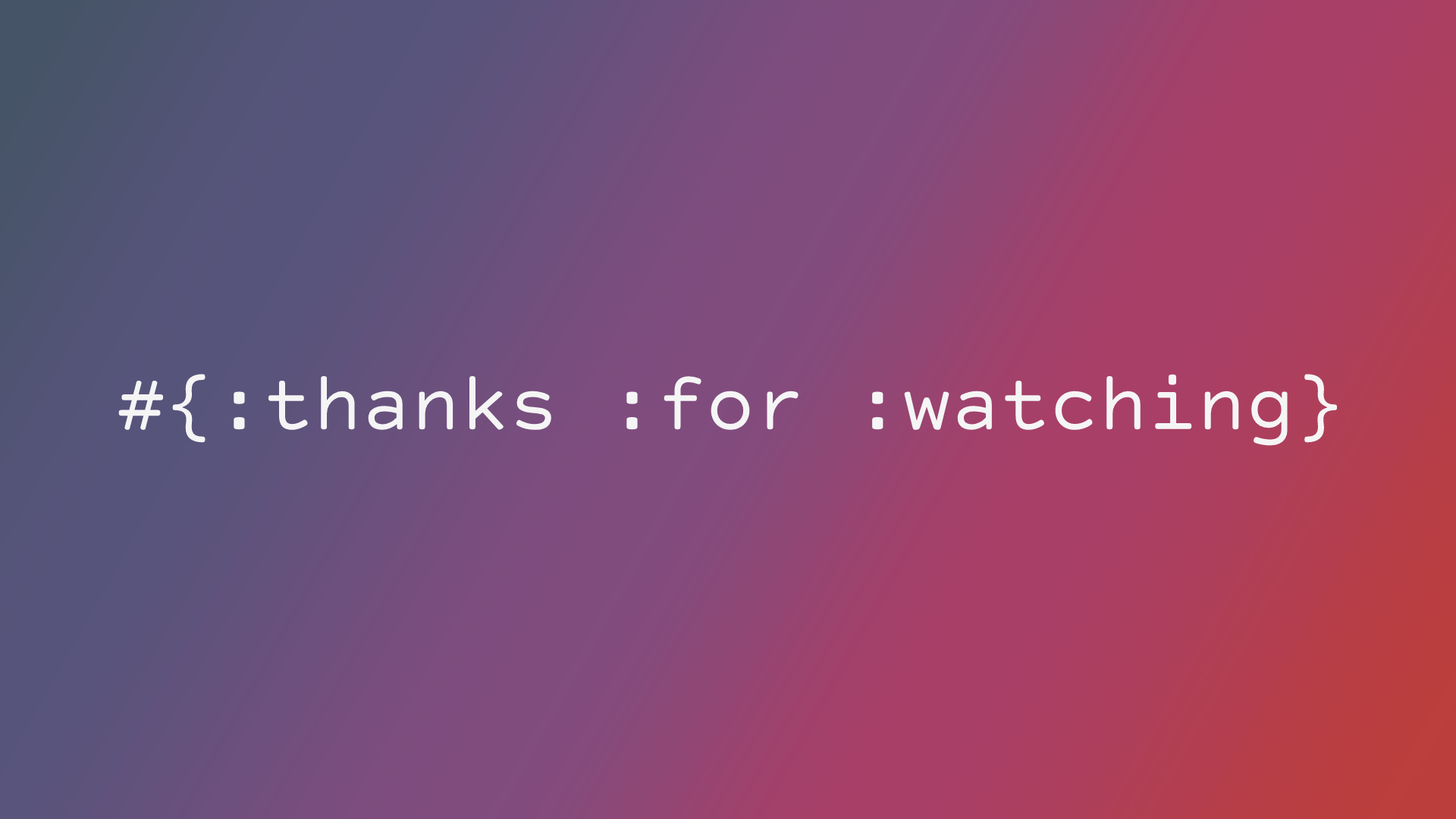
<style>
.page{position:relative;width:1456px;height:819px}
.page>*{position:absolute;margin:0}
.t1{font:81.9px "CourierPrimeCode-Regular";color:#f5f5f5}
</style>
<div class="page">
<p class="t1" style="left:118px;top:374px;width:1220px;height:72px">#{:thanks :for :watching}</p>
</div>
